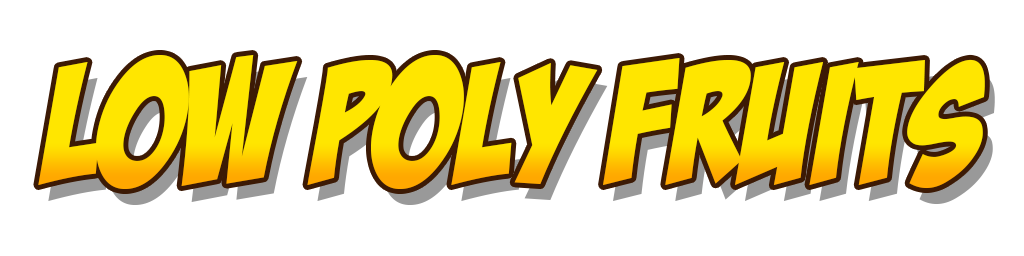
<style>
.page{position:relative;width:1024px;height:256px;background:#ffffff}
.page>*{position:absolute;margin:0}
.t1{font:170px "BadaBoomBB";color:#ffe600}
</style>
<div class="page">
<p class="t1" style="left:38px;top:55px;width:947px;height:134px">Low poly fruits</p>
</div>
